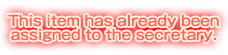
<style>
.page{position:relative;width:228px;height:55px}
.page>*{position:absolute;margin:0}
.t1{font:14px/14px "GothicMB101Pro-Medium";color:#ff664d}
</style>
<div class="page">
<p class="t1" style="left:8px;top:14px;width:211px;height:28px;text-align:center">This item has already been<br>assigned to the secretary.</p>
</div>
